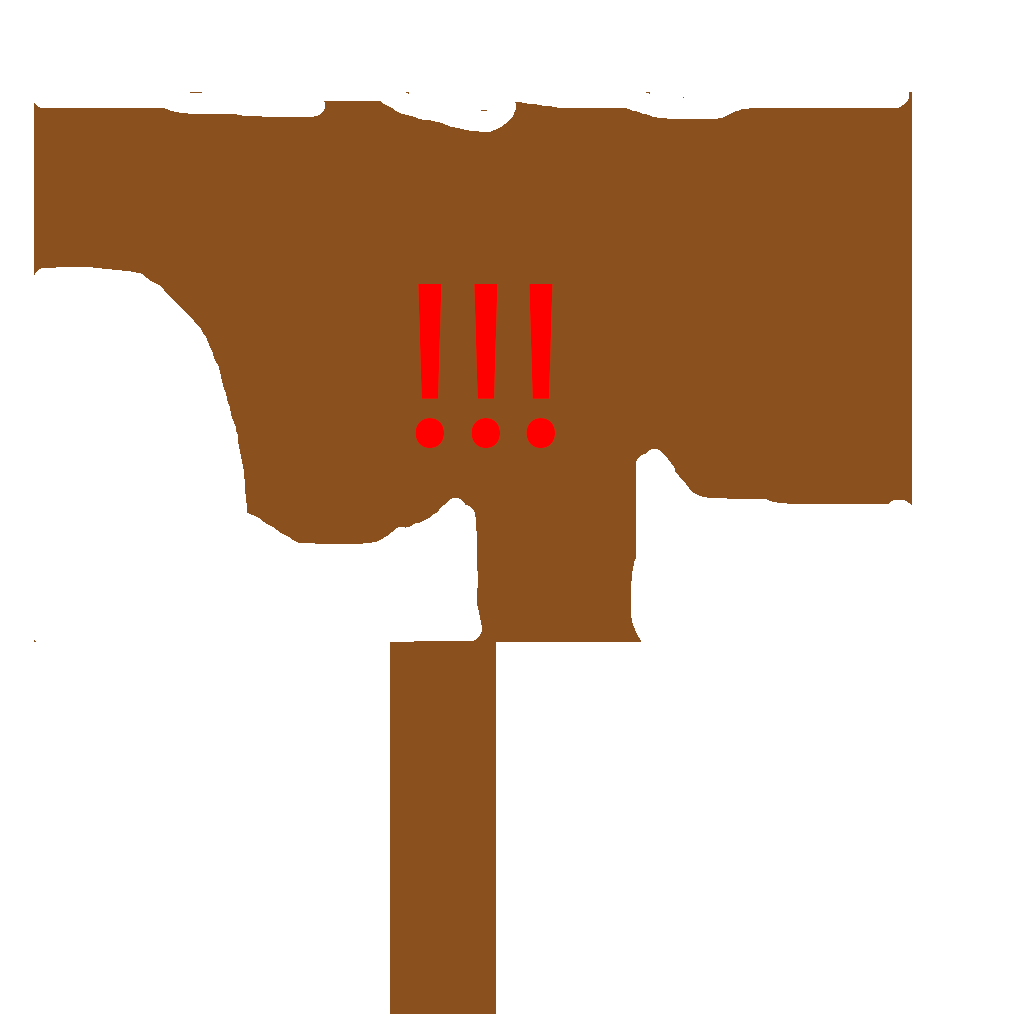
<style>
.page{position:relative;width:1024px;height:1024px;background:#ffffff}
.page>*{position:absolute;margin:0}
.t1{font:241px "MyriadPro-Regular";color:#ff0000}
</style>
<div class="page">
<p class="t1" style="left:415px;top:284px;width:140px;height:165px">!!!</p>
</div>
